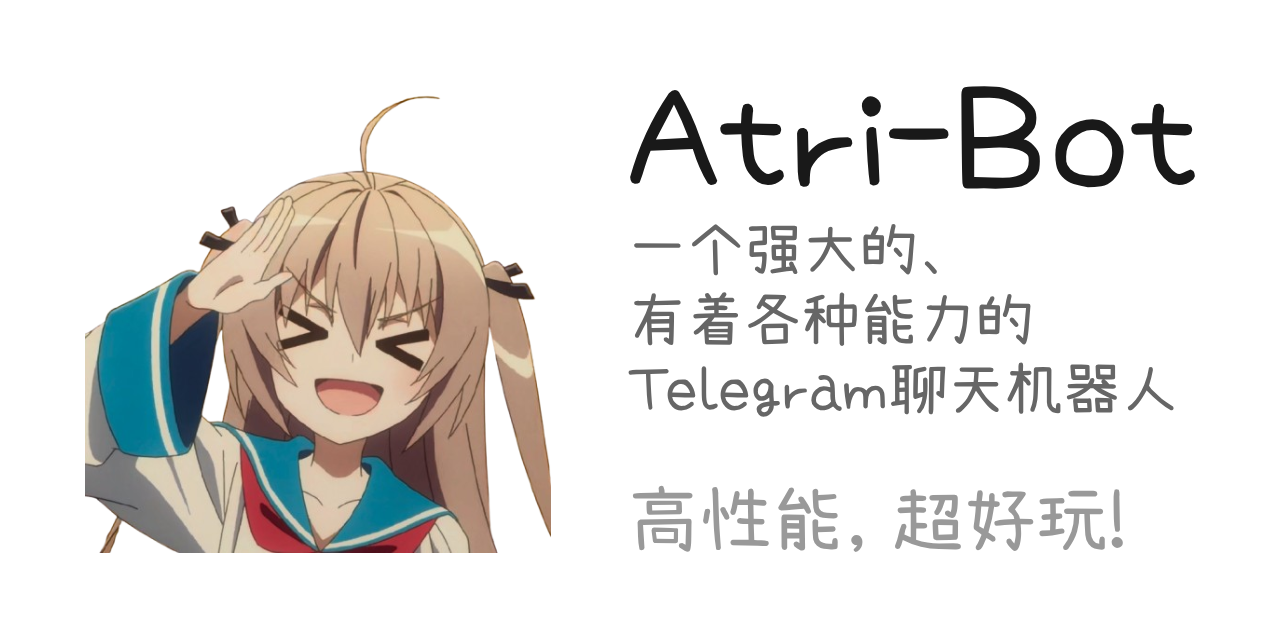
<style>
.page{position:relative;width:1280px;height:640px;background:#ffffff}
.page>*{position:absolute;margin:0}
.t1{font:144px "Xiaolai";color:#191919}
.t2{font:58px "Xiaolai";color:#666666}
.t3{font:72px "Xiaolai";color:#999999}
</style>
<div class="page">
<p class="t1" style="left:630px;top:86px;width:565px;height:103px">Atri-Bot</p>
<p class="t2" style="left:628px;top:223px;width:546px;height:194px">一个强大的、<br>有着各种能力的<br>Telegram聊天机器人</p>
<p class="t3" style="left:632px;top:485px;width:491px;height:67px">高性能, 超好玩!</p>
</div>
